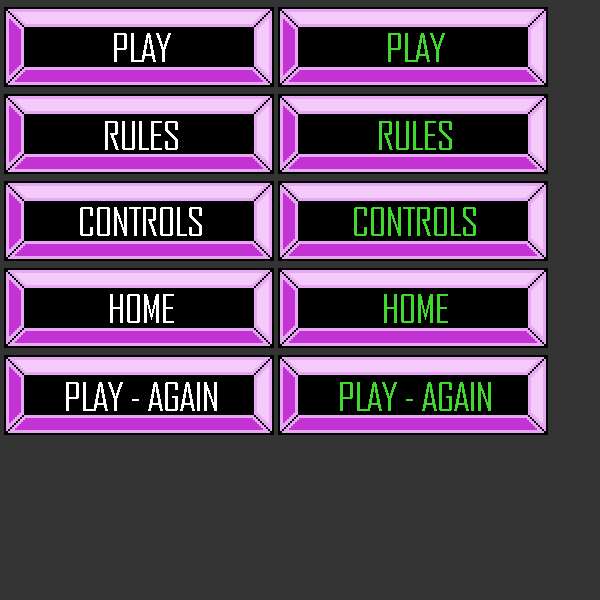
<style>
.page{position:relative;width:600px;height:600px;background:#333333}
.page>*{position:absolute;margin:0}
.t1{font:37.5px "AgencyFB-Reg";color:#ffffff}
.t2{font:37.5px "AgencyFB-Reg";color:#41d92d}
</style>
<div class="page">
<p class="t1" style="left:114px;top:33px;width:57px;height:29px">PLAY</p>
<p class="t2" style="left:388px;top:33px;width:57px;height:29px">PLAY</p>
<p class="t1" style="left:105px;top:121px;width:73px;height:29px">RULES</p>
<p class="t2" style="left:379px;top:121px;width:73px;height:29px">RULES</p>
<p class="t1" style="left:80px;top:207px;width:122px;height:29px">CONTROLS</p>
<p class="t2" style="left:354px;top:207px;width:122px;height:29px">CONTROLS</p>
<p class="t1" style="left:110px;top:294px;width:64px;height:29px">HOME</p>
<p class="t2" style="left:384px;top:294px;width:64px;height:29px">HOME</p>
<p class="t1" style="left:66px;top:382px;width:151px;height:29px">PLAY - AGAIN</p>
</div>
